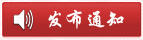
<style>
.page{position:relative;width:143px;height:40px}
.page>*{position:absolute;margin:0}
.t1{font:20px "STXingkai";color:#fcfafa}
</style>
<div class="page">
<p class="t1" style="left:48px;top:9px;width:76px;height:20px">发布通知</p>
</div>
